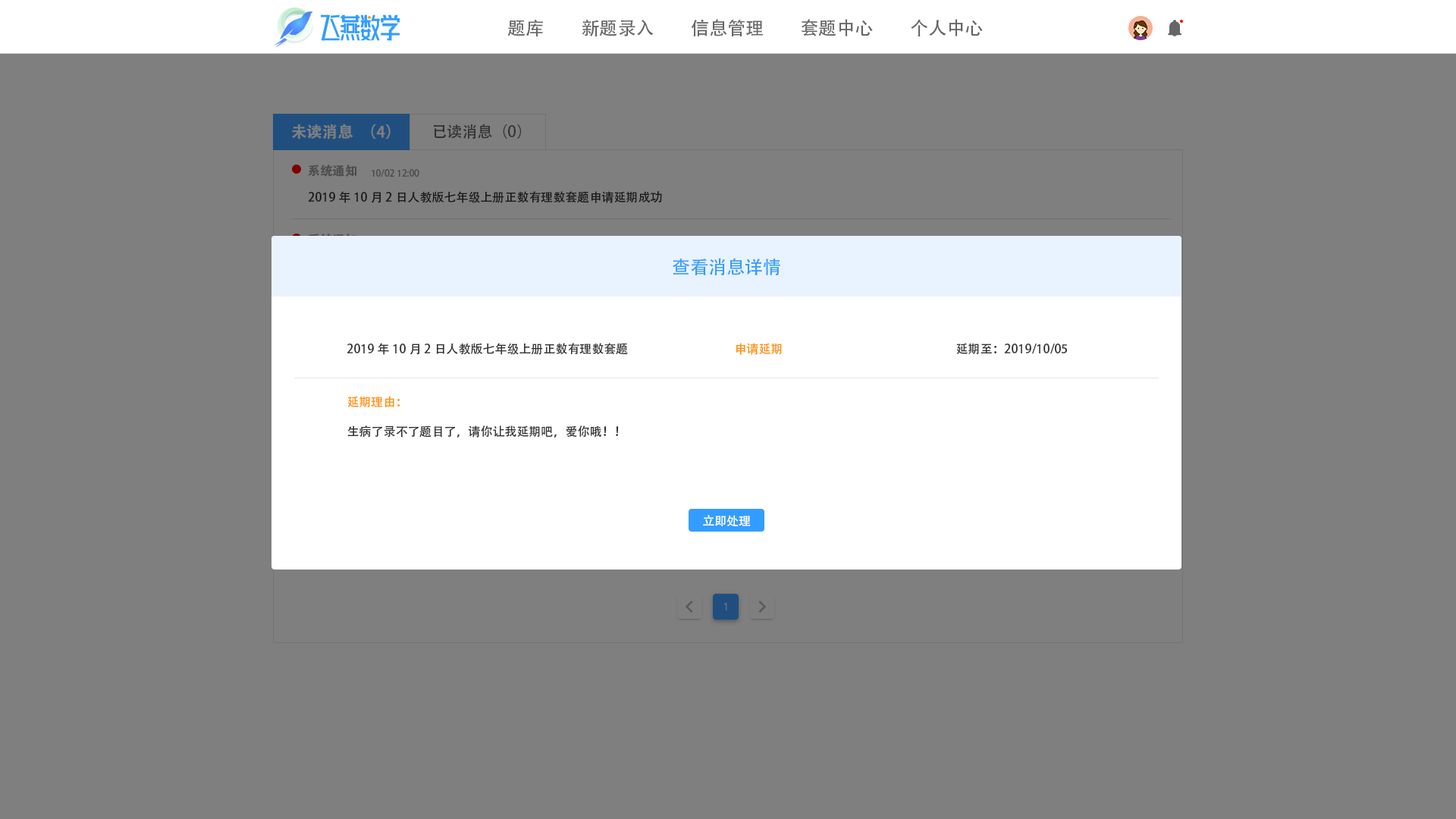
<style>
.page{position:relative;width:1456px;height:819px;background:#7f7f7f}
.page>*{position:absolute;margin:0}
.t1{font:18.2px "AdobeHeitiStd-Regular";color:#666666}
.t2{font:15.2px "AdobeHeitiStd-Regular";color:#7f7f7f;font-weight:bold}
.t3{font:15.2px "AdobeHeitiStd-Regular";color:#333333}
.t4{font:12.1px "AdobeHeitiStd-Regular";color:#4c4c4c;font-weight:bold}
.t5{font:9.1px "AdobeHeitiStd-Regular";color:#4c4c4c}
.t6{font:12.1px "AdobeHeitiStd-Regular";color:#191919}
.t7{font:18.2px "AdobeHeitiStd-Regular";color:#339dff}
.t8{font:12.1px "AdobeHeitiStd-Regular";color:#333333}
.t9{font:12.1px "AdobeHeitiStd-Regular";color:#fe9002}
.t10{font:12.1px "AdobeHeitiStd-Regular";color:#ffffff}
</style>
<div class="page">
<p class="t1" style="left:507px;top:20px;width:36px;height:16px">题库</p>
<p class="t1" style="left:582px;top:20px;width:72px;height:16px">新题录入</p>
<p class="t1" style="left:691px;top:19px;width:72px;height:18px">信息管理</p>
<p class="t1" style="left:802px;top:19px;width:71px;height:17px">套题中心</p>
<p class="t1" style="left:911px;top:19px;width:72px;height:17px">个人中心</p>
<p class="t2" style="left:292px;top:124px;width:99px;height:16px">未读消息（4）</p>
<p class="t3" style="left:434px;top:124px;width:87px;height:15px">已读消息（0）</p>
<p class="t4" style="left:308px;top:165px;width:49px;height:12px">系统通知</p>
<p class="t5" style="left:372px;top:169px;width:47px;height:8px">10/02 12:00</p>
<p class="t6" style="left:308px;top:191px;width:354px;height:12px">2019年10月2日人教版七年级上册正数有理数套题申请延期成功</p>
<p class="t7" style="left:673px;top:258px;width:107px;height:17px">查看消息详情</p>
<p class="t8" style="left:347px;top:343px;width:281px;height:12px">2019年10月2日人教版七年级上册正数有理数套题</p>
<p class="t9" style="left:736px;top:343px;width:46px;height:12px">申请延期</p>
<p class="t8" style="left:956px;top:343px;width:112px;height:11px">延期至：2019/10/05</p>
<p class="t9" style="left:347px;top:396px;width:53px;height:11px">延期理由：</p>
<p class="t8" style="left:347px;top:425px;width:272px;height:13px">生病了录不了题目了，请你让我延期吧，爱你哦！！</p>
<p class="t10" style="left:703px;top:515px;width:48px;height:11px">立即处理</p>
</div>
